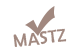
<style>
.page{position:relative;width:80px;height:50px;background:#ffffff}
.page>*{position:absolute;margin:0}
.t1{font:18px "BerlinSansFB-Reg";color:#a1887f}
</style>
<div class="page">
<p class="t1" style="left:13px;top:28px;width:54px;height:19px;rotate:-7deg">MASTZ</p>
</div>
